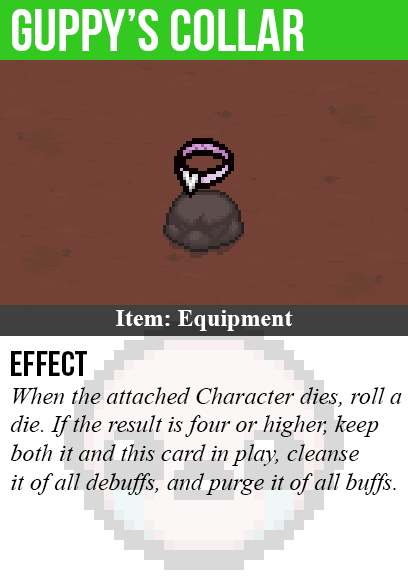
<style>
.page{position:relative;width:408px;height:585px;background:#734136}
.page>*{position:absolute;margin:0}
.t1{font:60px "BebasNeue";color:#ffffff}
.t2{font:24px "TimesNewRomanPS-BoldMT";color:#ffffff}
.t3{font:36px "BebasNeue";color:#000000}
.t4{font:24px "TimesNewRomanPS-ItalicMT";color:#000000}
</style>
<div class="page">
<p class="t1" style="left:12px;top:9px;width:292px;height:42px">guppy’s collar</p>
<p class="t2" style="left:116px;top:310px;width:177px;height:21px">Item: Equipment</p>
<p class="t3" style="left:11px;top:351px;width:76px;height:25px">Effect</p>
<p class="t4" style="left:10px;top:387px;width:392px;height:108px">When the attached Character dies, roll a<br>die. If the result is four or higher, keep<br>both it and this card in play, cleanse<br>it of all debuffs, and purge it of all buffs.</p>
</div>
